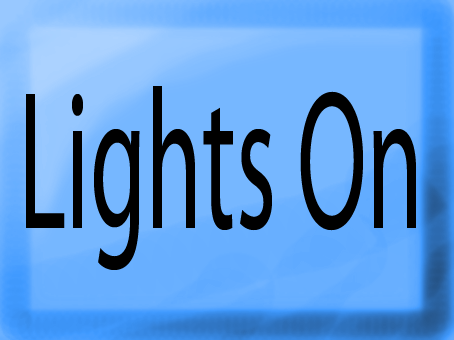
<style>
.page{position:relative;width:454px;height:340px}
.page>*{position:absolute;margin:0}
.t1{font:199.5px "MyriadPro-Regular";color:#000000;scale:0.51 1}
</style>
<div class="page">
<p class="t1" style="left:26px;top:86px;width:390px;height:184px">Lights On</p>
</div>
